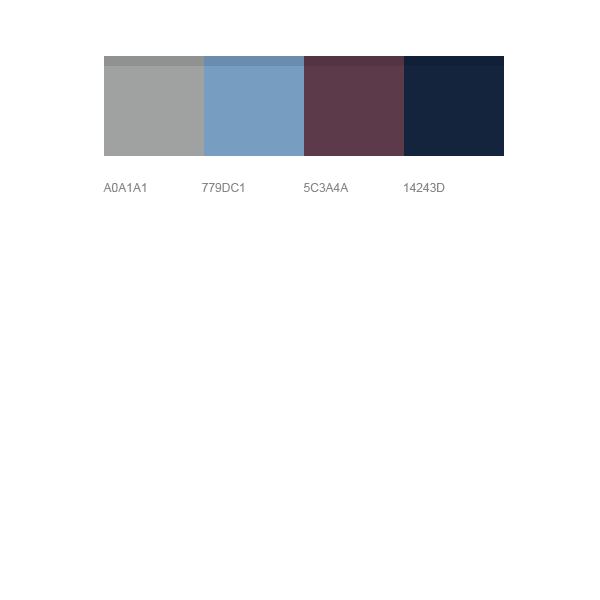
<style>
.page{position:relative;width:600px;height:600px;background:#ffffff}
.page>*{position:absolute;margin:0}
.t1{font:12px "ArialMT";color:#878787;text-transform:uppercase}
</style>
<div class="page">
<p class="t1" style="left:103px;top:183px;width:43px;height:9px">a0a1a1</p>
<p class="t1" style="left:202px;top:183px;width:42px;height:9px">779dc1</p>
<p class="t1" style="left:303px;top:183px;width:46px;height:9px">5c3a4a</p>
<p class="t1" style="left:404px;top:183px;width:41px;height:9px">14243d</p>
</div>
